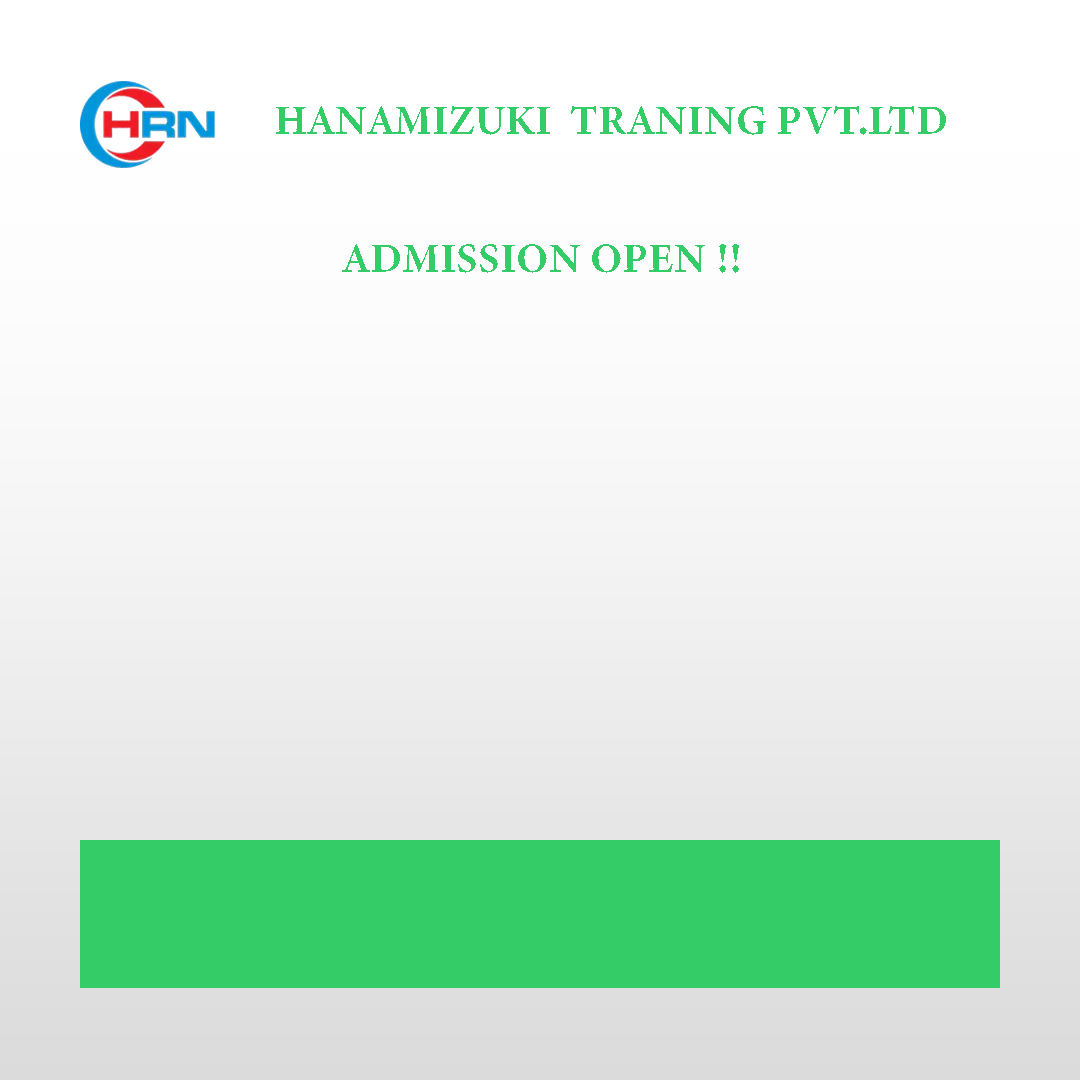
<style>
.page{position:relative;width:1080px;height:1080px}
.page>*{position:absolute;margin:0}
.t1{font:42px "MinionConceptRoman-Bold";color:#33cc66}
</style>
<div class="page">
<p class="t1" style="left:276px;top:106px;width:670px;height:29px">HANAMIZUKI  TRANING PVT.LTD</p>
<p class="t1" style="left:342px;top:244px;width:397px;height:29px">ADMISSION OPEN !!</p>
</div>
